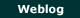
<style>
.page{position:relative;width:80px;height:18px;background:#003333}
.page>*{position:absolute;margin:0}
.t1{font:11px "Verdana-Bold";color:#ffffff}
</style>
<div class="page">
<p class="t1" style="left:17px;top:4px;width:47px;height:12px">Weblog</p>
</div>
